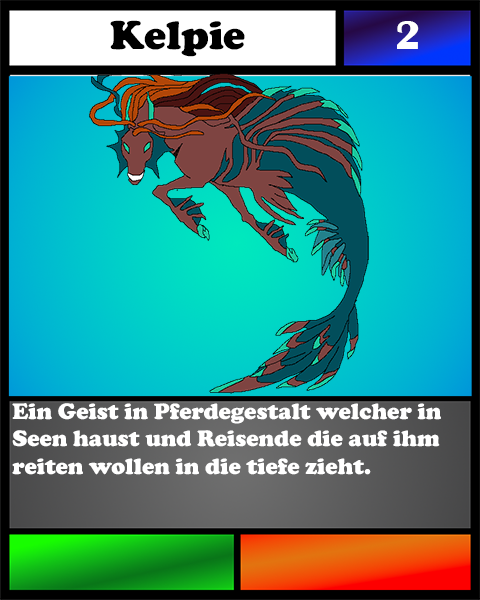
<style>
.page{position:relative;width:480px;height:600px}
.page>*{position:absolute;margin:0}
.t1{font:41.7px "CooperBlack";color:#000000}
.t2{font:41.7px "BritannicBold";color:#ffffff}
.t3{font:23.1px "CooperBlack";color:#ffffff}
</style>
<div class="page">
<p class="t1" style="left:110px;top:20px;width:135px;height:37px">Kelpie</p>
<p class="t2" style="left:397px;top:21px;width:22px;height:28px">2</p>
<p class="t3" style="left:12px;top:403px;width:429px;height:72px">Ein Geist in Pferdegestalt welcher in <br>Seen haust und Reisende die auf ihm <br>reiten wollen in die tiefe zieht.</p>
</div>
